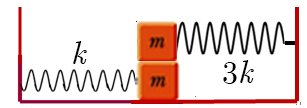
<style>
.page{position:relative;width:307px;height:108px;background:#ffffff}
.page>*{position:absolute;margin:0}
.t1{font:32px "CMUSerif-Italic";color:#000000}
.t2{font:32px "CMUSerif-Roman";color:#000000}
</style>
<div class="page">
<p class="t1" style="left:73px;top:41px;width:14px;height:23px">k</p>
<p class="t2" style="left:223px;top:60px;width:31px;height:24px">3<span class="t1">k</span></p>
</div>
